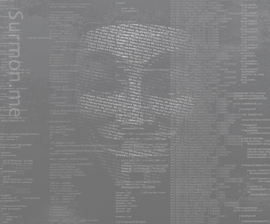
<style>
.page{position:relative;width:270px;height:224px}
.page>*{position:absolute;margin:0}
.t1{font:20.8px "Skia-Regular";color:#9b9b9c}
</style>
<div class="page">
<p class="t1" style="left:8px;top:11px;width:16px;height:106px;rotate:90deg">Surmon.me</p>
</div>
